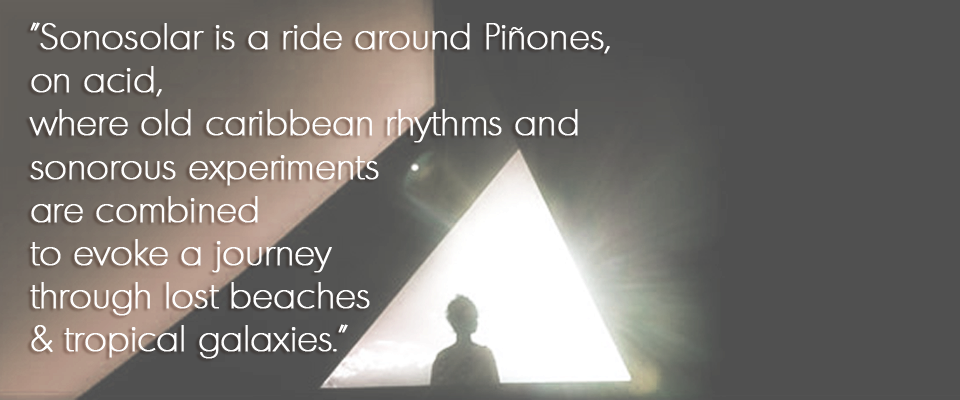
<style>
.page{position:relative;width:960px;height:400px;background:#505050}
.page>*{position:absolute;margin:0}
.t1{font:36px "Montreal-Xlight";color:#fefefe;font-weight:bold}
</style>
<div class="page">
<p class="t1" style="left:29px;top:22px;width:581px;height:337px">"Sonosolar is a ride around Piñones, <br>on acid, <br>where old caribbean rhythms and <br>sonorous experiments <br>are combined <br>to evoke a journey <br>through lost beaches <br>&amp; tropical galaxies."</p>
</div>
